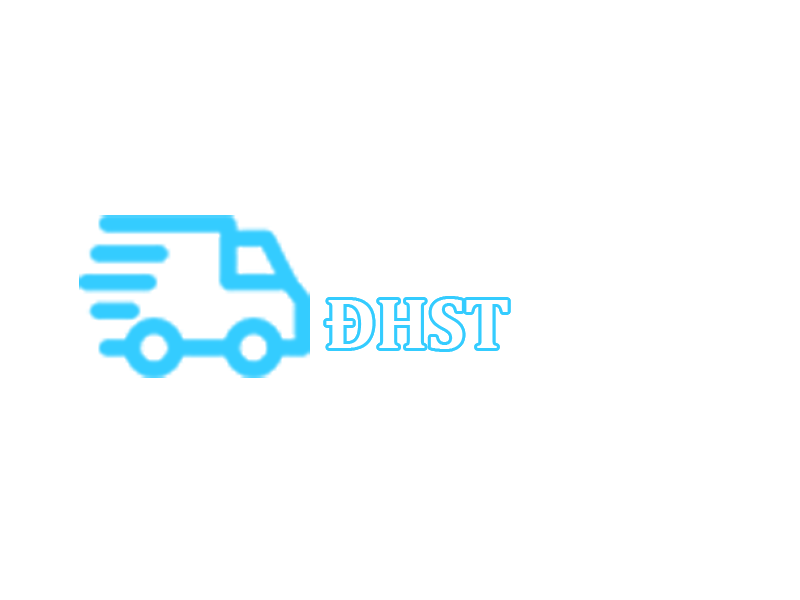
<style>
.page{position:relative;width:800px;height:600px;background:#ffffff}
.page>*{position:absolute;margin:0}
.t1{font:72px "Cambria-Bold";color:#ffffff}
</style>
<div class="page">
<p class="t1" style="left:326px;top:299px;width:182px;height:50px">ĐHST</p>
</div>
